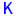
<style>
.page{position:relative;width:16px;height:16px;background:#ffffff}
.page>*{position:absolute;margin:0}
.t1{font:16px "NotoSansKR-Medium";color:#0006ff}
</style>
<div class="page">
<p class="t1" style="left:4px;top:2px;width:9px;height:12px">K</p>
</div>
